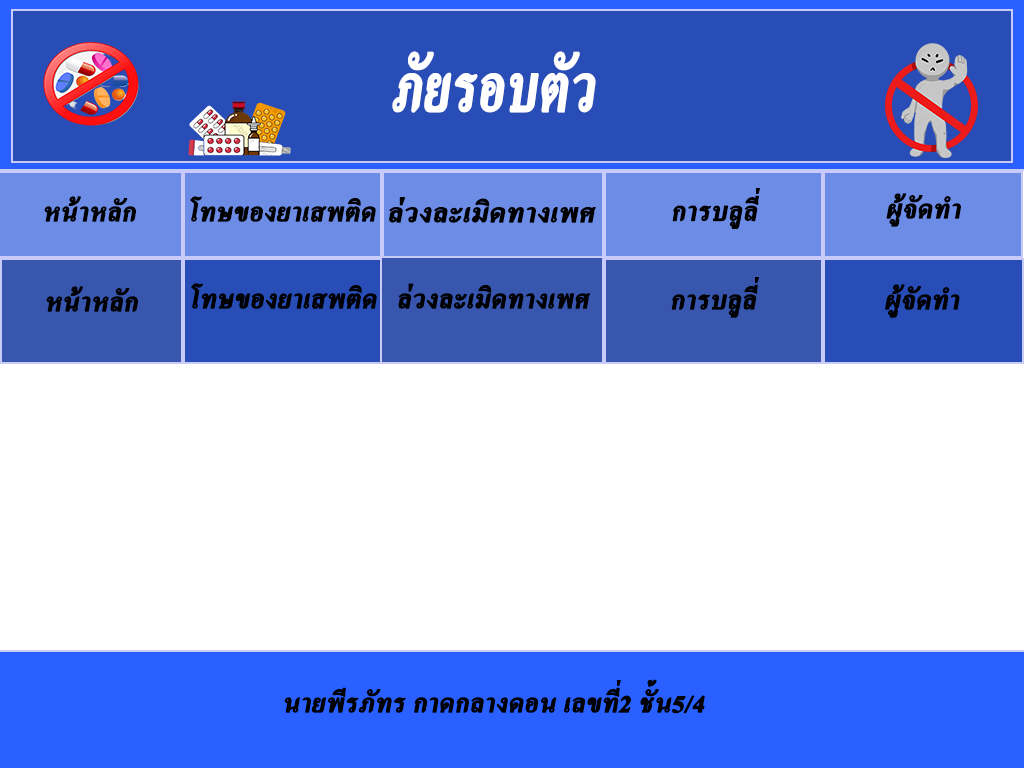
<style>
.page{position:relative;width:1024px;height:768px;background:#ffffff}
.page>*{position:absolute;margin:0}
.t1{font:91.9px "AngsanaNew-Bold";color:#ffffff;font-variant:small-caps;font-weight:bold;font-style:italic;scale:0.75 1}
.t2{font:36px "AngsanaNew-Bold";color:#000000;font-variant:small-caps;font-weight:bold;font-style:italic}
.t3{font:36.3px "AngsanaNew-Bold";color:#000000;font-variant:small-caps;font-weight:bold;font-style:italic;scale:1.07 1}
.t4{font:36.3px "AngsanaNew-Bold";color:#000000;font-variant:small-caps;font-weight:bold;font-style:italic}
</style>
<div class="page">
<p class="t1" style="left:392px;top:51px;width:204px;height:62px">ภัยรอบตัว</p>
<p class="t2" style="left:44px;top:196px;width:92px;height:26px">หน้าหลัก</p>
<p class="t2" style="left:190px;top:196px;width:186px;height:26px">โทษของยาเสพติด</p>
<p class="t3" style="left:389px;top:197px;width:207px;height:26px">ล่วงละเมิดทางเพศ</p>
<p class="t4" style="left:672px;top:188px;width:88px;height:41px">การบลูลี่</p>
<p class="t2" style="left:886px;top:193px;width:75px;height:34px">ผู้จัดทำ</p>
<p class="t2" style="left:671px;top:277px;width:88px;height:41px">การบลูลี่</p>
<p class="t2" style="left:46px;top:286px;width:92px;height:26px">หน้าหลัก</p>
<p class="t2" style="left:191px;top:283px;width:186px;height:26px">โทษของยาเสพติด</p>
<p class="t2" style="left:398px;top:283px;width:193px;height:26px">ล่วงละเมิดทางเพศ</p>
<p class="t2" style="left:885px;top:284px;width:75px;height:34px">ผู้จัดทำ</p>
<p class="t2" style="left:284px;top:679px;width:421px;height:35px">นายพีรภัทร กาดกลางดอน เลขที่2 ชั้น5/4</p>
</div>
